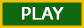
<style>
.page{position:relative;width:84px;height:28px;background:#116712}
.page>*{position:absolute;margin:0}
.t1{font:17px "Verdana";color:#ffffff;font-weight:bold}
</style>
<div class="page">
<p class="t1" style="left:22px;top:7px;width:42px;height:13px">PLAY</p>
</div>
